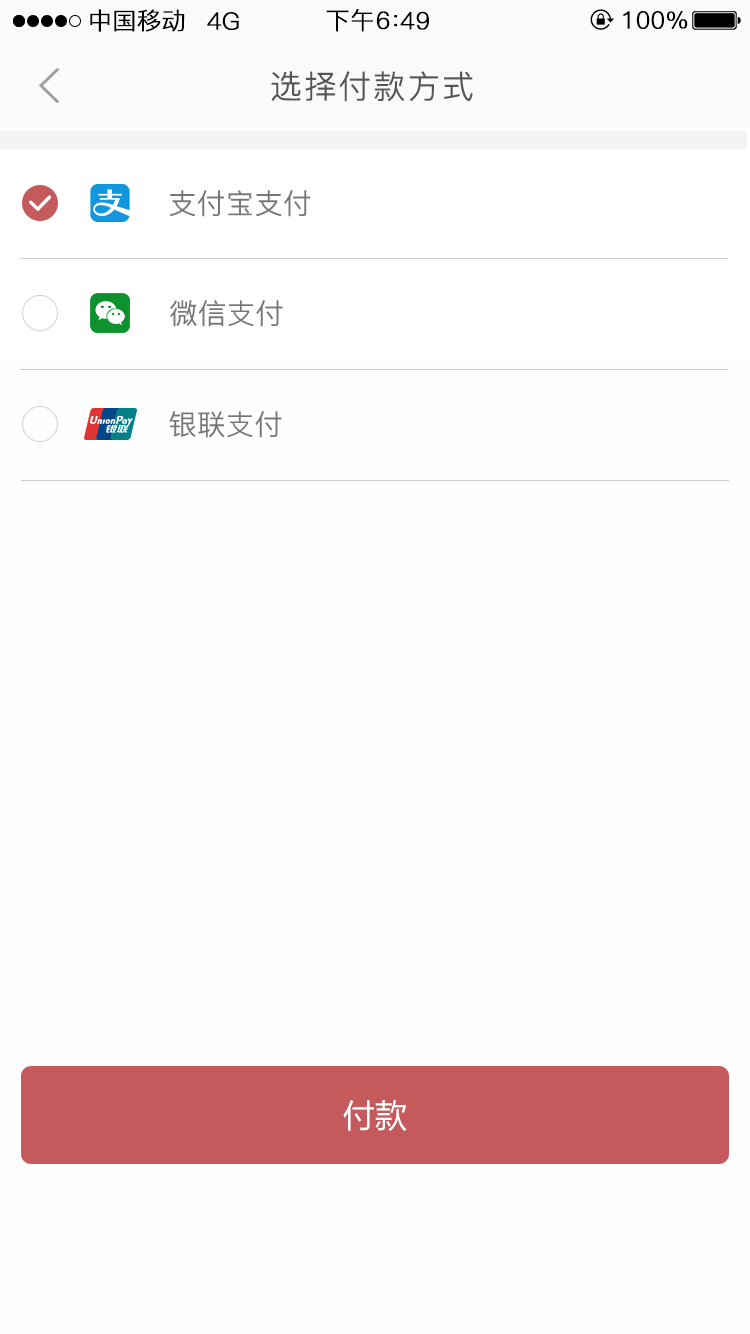
<style>
.page{position:relative;width:750px;height:1334px;background:#fefefe}
.page>*{position:absolute;margin:0}
.t1{font:24px "PingFang-SC-Regular";color:#000000;font-weight:bold}
.t2{font:32px "PingFang-SC-Regular";letter-spacing:0.05em;color:#555555;font-weight:bold}
.t3{font:28px "PingFang-SC-Regular";color:#777777;font-weight:bold}
.t4{font:32px "MicrosoftYaHeiUI";color:#ffffff}
</style>
<div class="page">
<p class="t1" style="left:90px;top:9px;width:95px;height:23px">中国移动</p>
<p class="t1" style="left:207px;top:12px;width:32px;height:18px">4G</p>
<p class="t1" style="left:326px;top:9px;width:47px;height:23px">下午</p>
<p class="t1" style="left:376px;top:11px;width:14px;height:19px">6</p>
<p class="t1" style="left:394px;top:15px;width:4px;height:12px">：</p>
<p class="t1" style="left:400px;top:11px;width:29px;height:19px">49</p>
<p class="t1" style="left:623px;top:11px;width:65px;height:18px">100%</p>
<p class="t2" style="left:271px;top:71px;width:202px;height:31px">选择付款方式</p>
<p class="t3" style="left:169px;top:190px;width:142px;height:27px">支付宝支付</p>
<p class="t3" style="left:170px;top:300px;width:113px;height:27px">微信支付</p>
<p class="t3" style="left:169px;top:411px;width:113px;height:27px">银联支付</p>
<p class="t4" style="left:343px;top:1100px;width:64px;height:31px">付款</p>
</div>
